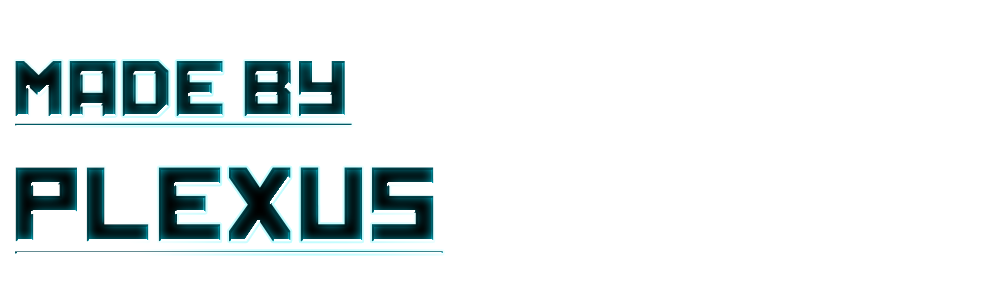
<style>
.page{position:relative;width:1000px;height:300px;background:#ffffff}
.page>*{position:absolute;margin:0}
.t1{font:75px/62.5px "Kremlin";text-transform:uppercase;text-decoration:underline;scale:1.03 1}
.t2{font:100px/62.5px "Kremlin";text-transform:uppercase;text-decoration:underline;scale:1.03 1}
</style>
<div class="page">
<p class="t1" style="left:15px;top:61px;width:428px;height:193px;text-align:right">Made By<br><br><span class="t2">PLEXUS</span></p>
</div>
